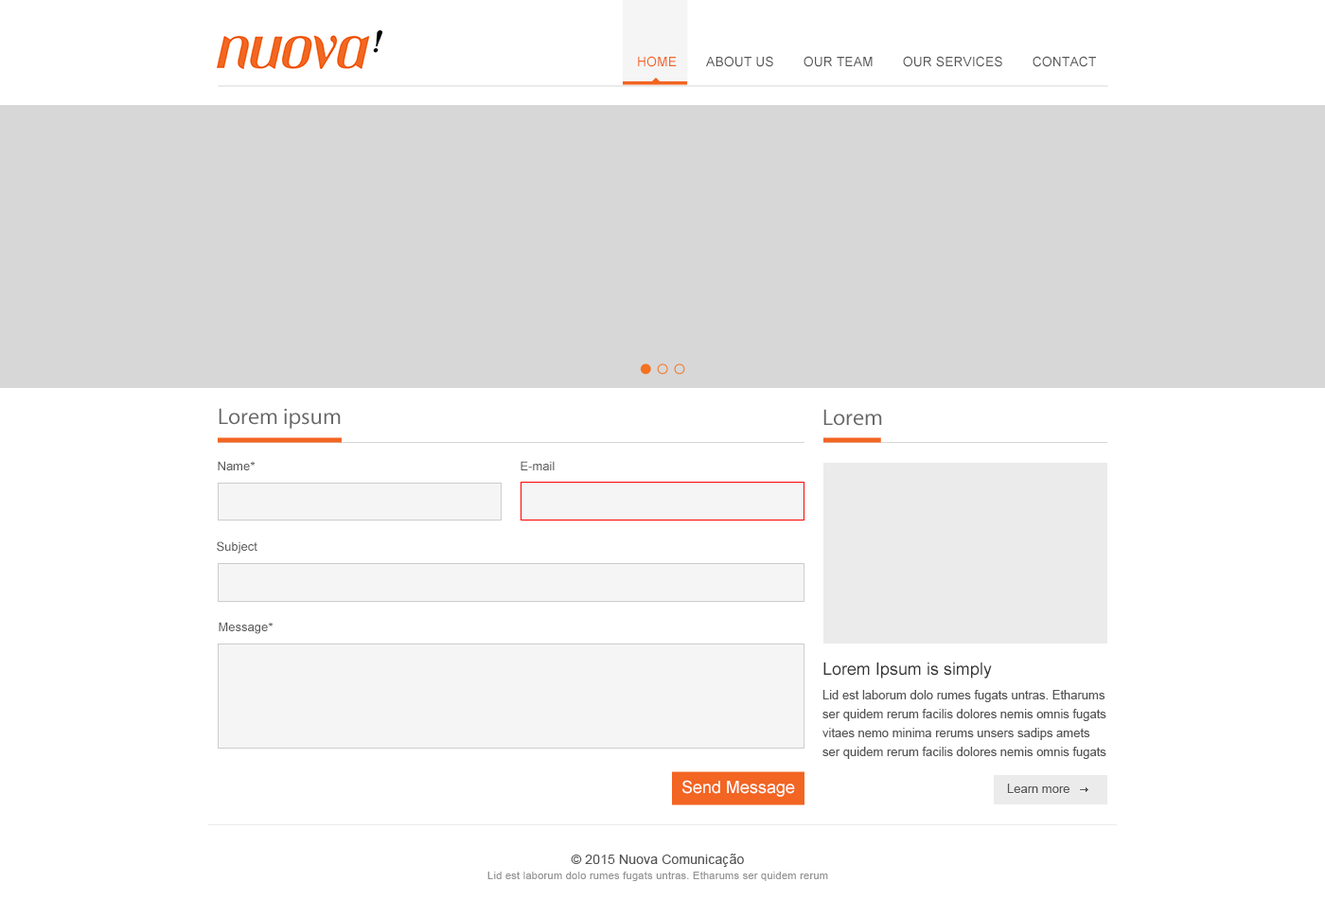
<style>
.page{position:relative;width:1325px;height:900px;background:#ffffff}
.page>*{position:absolute;margin:0}
.t1{font:13.2px "ArialMT";color:#555555}
.t2{font:13.2px "ArialMT";color:#f26522}
.t3{font:22.7px "MyriadPro-Regular";color:#686868}
.t4{font:12.3px "ArialMT";color:#555555}
.t5{font:17px "ArialMT";color:#363636}
.t6{font:12.3px/18.9px "ArialMT";color:#555555}
.t7{font:17px "ArialMT";color:#ffffff}
.t8{font:10.4px/15.1px "ArialMT";letter-spacing:0.025em;color:#959595}
.t9{font:13.2px/15.1px "ArialMT";letter-spacing:0.01em;color:#555555}
</style>
<div class="page">
<p class="t1" style="left:638px;top:56px;width:458px;height:11px"><span class="t2">HOME</span>        ABOUT US        OUR TEAM        OUR SERVICES        CONTACT</p>
<p class="t3" style="left:219px;top:408px;width:122px;height:21px">Lorem ipsum</p>
<p class="t3" style="left:823px;top:409px;width:59px;height:17px">Lorem</p>
<p class="t4" style="left:218px;top:461px;width:38px;height:9px">Name*</p>
<p class="t4" style="left:521px;top:461px;width:34px;height:9px">E-mail</p>
<p class="t4" style="left:217px;top:541px;width:40px;height:13px">Subject</p>
<p class="t4" style="left:219px;top:622px;width:55px;height:12px">Message*</p>
<p class="t5" style="left:823px;top:662px;width:169px;height:17px">Lorem Ipsum is simply</p>
<p class="t6" style="left:822px;top:690px;width:284px;height:69px">Lid est laborum dolo rumes fugats untras. Etharums ser quidem rerum facilis dolores nemis omnis fugats vitaes nemo minima rerums unsers sadips amets ser quidem rerum facilis dolores nemis omnis fugats .</p>
<p class="t7" style="left:682px;top:780px;width:113px;height:17px">Send Message</p>
<p class="t4" style="left:1007px;top:784px;width:62px;height:9px">Learn more</p>
<p class="t8" style="left:487px;top:854px;width:341px;height:27px;text-align:center"><span class="t9">© 2015 Nuova Comunicação<br></span>Lid est laborum dolo rumes fugats untras. Etharums ser quidem rerum</p>
</div>
